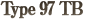
<style>
.page{position:relative;width:90px;height:19px;background:#ffffff}
.page>*{position:absolute;margin:0}
.t1{font:18px "RyuminPro-ExBold";letter-spacing:-0.08em;color:#4a3f32;font-weight:bold;scale:0.9 1}
</style>
<div class="page">
<p class="t1" style="left:0px;top:1px;width:83px;height:18px">Type 97 TB</p>
</div>
